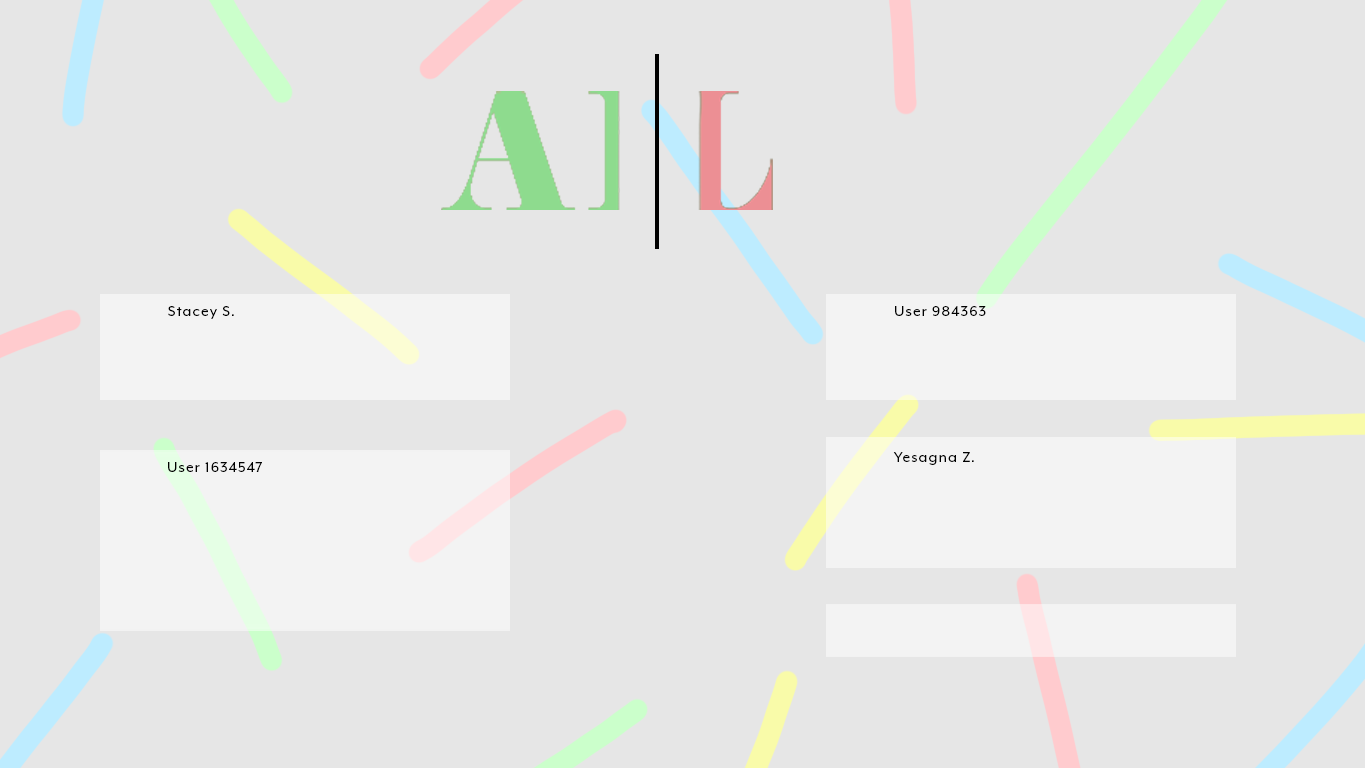
<style>
.page{position:relative;width:1366px;height:768px;background:#e6e6e6}
.page>*{position:absolute;margin:0}
.t1{font:16px "MrEavesXLModOT-Reg";letter-spacing:0.075em;color:#000000}
</style>
<div class="page">
<p class="t1" style="left:168px;top:306px;width:66px;height:13px">Stacey S.</p>
<p class="t1" style="left:895px;top:306px;width:91px;height:10px">User 984363</p>
<p class="t1" style="left:168px;top:462px;width:94px;height:10px">User 1634547</p>
<p class="t1" style="left:893px;top:452px;width:81px;height:13px">Yesagna Z.</p>
</div>
